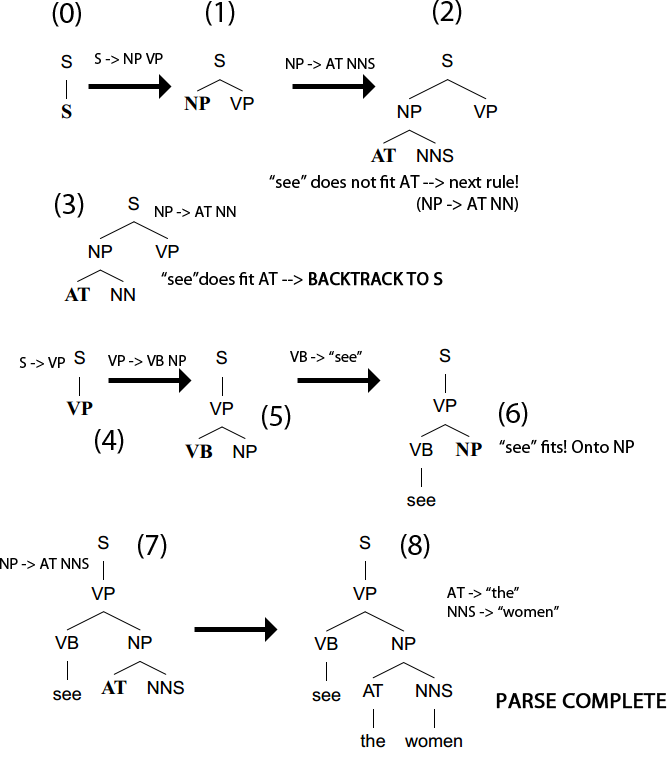
<style>
.page{position:relative;width:667px;height:760px;background:#ffffff}
.page>*{position:absolute;margin:0}
.t1{font:30px "MyriadPro-Regular";color:#000000}
.t2{font:16px "MyriadPro-Regular";color:#000000}
.t3{font:18px "MyriadPro-Regular";color:#000000}
.t4{font:18px "MyriadPro-Regular";color:#000000;font-weight:bold}
.t5{font:22px "MyriadPro-Regular";color:#000000;font-weight:bold}
</style>
<div class="page">
<p class="t1" style="left:52px;top:2px;width:29px;height:25px">(0)</p>
<p class="t1" style="left:206px;top:1px;width:29px;height:25px">(1)</p>
<p class="t1" style="left:433px;top:0px;width:29px;height:25px">(2)</p>
<p class="t2" style="left:94px;top:53px;width:69px;height:11px">S -&gt; NP VP</p>
<p class="t2" style="left:286px;top:58px;width:89px;height:11px">NP -&gt; AT NNS</p>
<p class="t3" style="left:269px;top:174px;width:249px;height:38px;text-align:right">“see” does not fit AT --&gt; next rule!<br>(NP -&gt; AT NN)</p>
<p class="t1" style="left:55px;top:193px;width:29px;height:25px">(3)</p>
<p class="t2" style="left:155px;top:206px;width:81px;height:11px">NP -&gt; AT NN</p>
<p class="t3" style="left:161px;top:271px;width:282px;height:15px">“see”does fit AT --&gt; <span class="t4">BACKTRACK TO S</span></p>
<p class="t2" style="left:290px;top:350px;width:72px;height:12px">VB -&gt; “see”</p>
<p class="t2" style="left:19px;top:357px;width:46px;height:11px">S -&gt; VP</p>
<p class="t2" style="left:108px;top:355px;width:78px;height:11px">VP -&gt; VB NP</p>
<p class="t1" style="left:262px;top:405px;width:29px;height:25px">(5)</p>
<p class="t1" style="left:499px;top:402px;width:29px;height:25px">(6)</p>
<p class="t1" style="left:95px;top:429px;width:29px;height:25px">(4)</p>
<p class="t3" style="left:499px;top:439px;width:135px;height:14px">“see” fits! Onto NP</p>
<p class="t1" style="left:138px;top:534px;width:29px;height:25px">(7)</p>
<p class="t1" style="left:401px;top:534px;width:29px;height:25px">(8)</p>
<p class="t2" style="left:0px;top:558px;width:89px;height:11px">NP -&gt; AT NNS</p>
<p class="t2" style="left:447px;top:586px;width:112px;height:31px">AT -&gt; “the”<br>NNS -&gt; “women”</p>
<p class="t5" style="left:496px;top:693px;width:171px;height:16px">PARSE COMPLETE</p>
</div>
